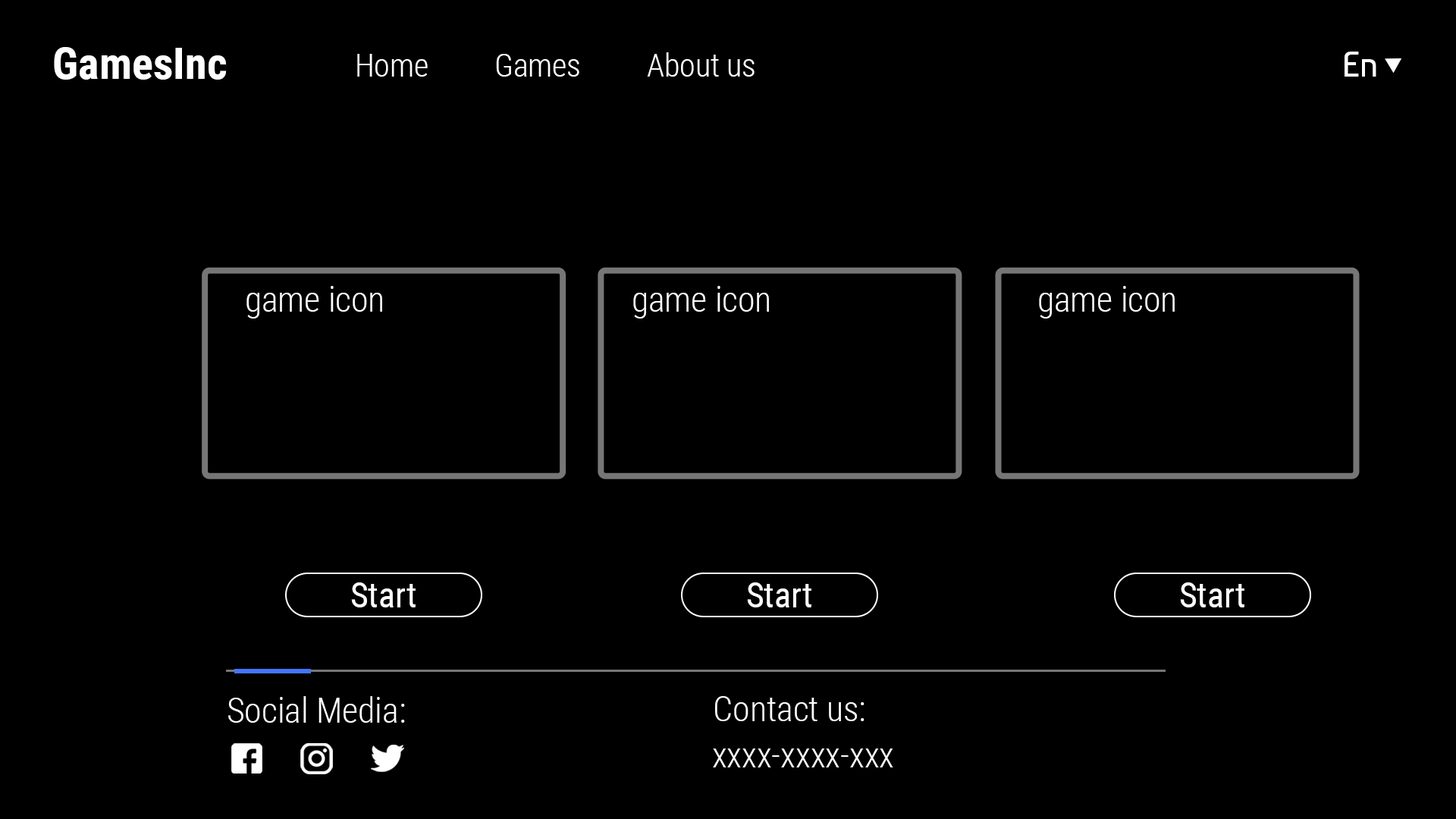
<style>
.page{position:relative;width:1456px;height:819px;background:#000000}
.page>*{position:absolute;margin:0}
.t1{font:44.2px "RobotoCondensed-Bold";color:#ffffff}
.t2{font:31.6px "RobotoCondensed-Light";color:#ffffff}
.t3{font:34.8px "Baumans-Regular";color:#ffffff}
.t4{font:34.8px "RobotoCondensed-Light";color:#ffffff}
.t5{font:34.8px "RobotoCondensed-Regular";color:#ffffff}
.t6{font:34.9px "RobotoCondensed-Light";color:#ffffff}
</style>
<div class="page">
<p class="t1" style="left:54px;top:47px;width:173px;height:33px">GamesInc</p>
<p class="t2" style="left:357px;top:54px;width:71px;height:23px">Home</p>
<p class="t2" style="left:496px;top:54px;width:83px;height:23px">Games</p>
<p class="t2" style="left:647px;top:52px;width:108px;height:25px">About us</p>
<p class="t3" style="left:1345px;top:52px;width:31px;height:25px">En</p>
<p class="t4" style="left:246px;top:286px;width:136px;height:32px">game icon</p>
<p class="t4" style="left:633px;top:286px;width:136px;height:32px">game icon</p>
<p class="t4" style="left:1039px;top:286px;width:136px;height:32px">game icon</p>
<p class="t5" style="left:351px;top:582px;width:65px;height:25px">Start</p>
<p class="t5" style="left:747px;top:582px;width:64px;height:25px">Start</p>
<p class="t5" style="left:1180px;top:582px;width:64px;height:25px">Start</p>
<p class="t6" style="left:228px;top:696px;width:177px;height:27px">Social Media:</p>
<p class="t4" style="left:715px;top:696px;width:149px;height:25px">Contact us:</p>
<p class="t4" style="left:713px;top:748px;width:180px;height:19px">xxxx-xxxx-xxx</p>
</div>
